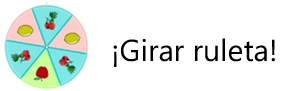
<style>
.page{position:relative;width:300px;height:91px;background:#ffffff}
.page>*{position:absolute;margin:0}
.t1{font:30.3px "SegoeUI";color:#000000}
</style>
<div class="page">
<p class="t1" style="left:113px;top:38px;width:162px;height:29px">¡Girar ruleta!</p>
</div>
